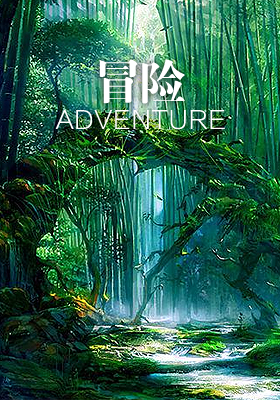
<style>
.page{position:relative;width:280px;height:400px}
.page>*{position:absolute;margin:0}
.t1{font:48px "FZDBSJW--GB1-0";letter-spacing:-0.06em;color:#ffffff}
.t2{font:24px "FZLTXHK--GBK1-0";letter-spacing:0.04em;color:#ffffff}
</style>
<div class="page">
<p class="t1" style="left:99px;top:59px;width:86px;height:45px">冒险</p>
<p class="t2" style="left:55px;top:110px;width:170px;height:20px">ADVENTURE</p>
</div>
